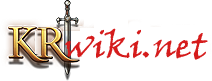
<style>
.page{position:relative;width:212px;height:81px;background:#ffffff}
.page>*{position:absolute;margin:0}
.t1{font:36px "VinerHandITC";letter-spacing:-0.01em;color:#d51c1c}
</style>
<div class="page">
<p class="t1" style="left:65px;top:28px;width:143px;height:32px">wiki.net</p>
</div>
